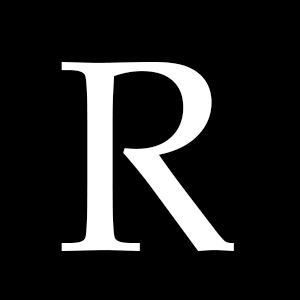
<style>
.page{position:relative;width:300px;height:300px;background:#000000}
.page>*{position:absolute;margin:0}
.t1{font:272px "BookAntiqua";color:#ffffff}
</style>
<div class="page">
<p class="t1" style="left:61px;top:62px;width:173px;height:189px">R</p>
</div>
